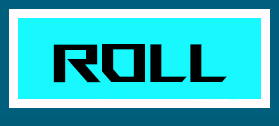
<style>
.page{position:relative;width:279px;height:126px;background:#18f9ff}
.page>*{position:absolute;margin:0}
.t1{font:54px "ROGFonts-Regular";color:#000000}
</style>
<div class="page">
<p class="t1" style="left:53px;top:44px;width:174px;height:39px">ROLL</p>
</div>
